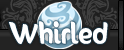
<style>
.page{position:relative;width:124px;height:50px}
.page>*{position:absolute;margin:0}
.t1{font:24px "SunnySide";color:#ffffff}
</style>
<div class="page">
<p class="t1" style="left:9px;top:21px;width:99px;height:23px">Whirled</p>
<p class="t1" style="left:9px;top:21px;width:99px;height:23px">Whirled</p>
</div>
